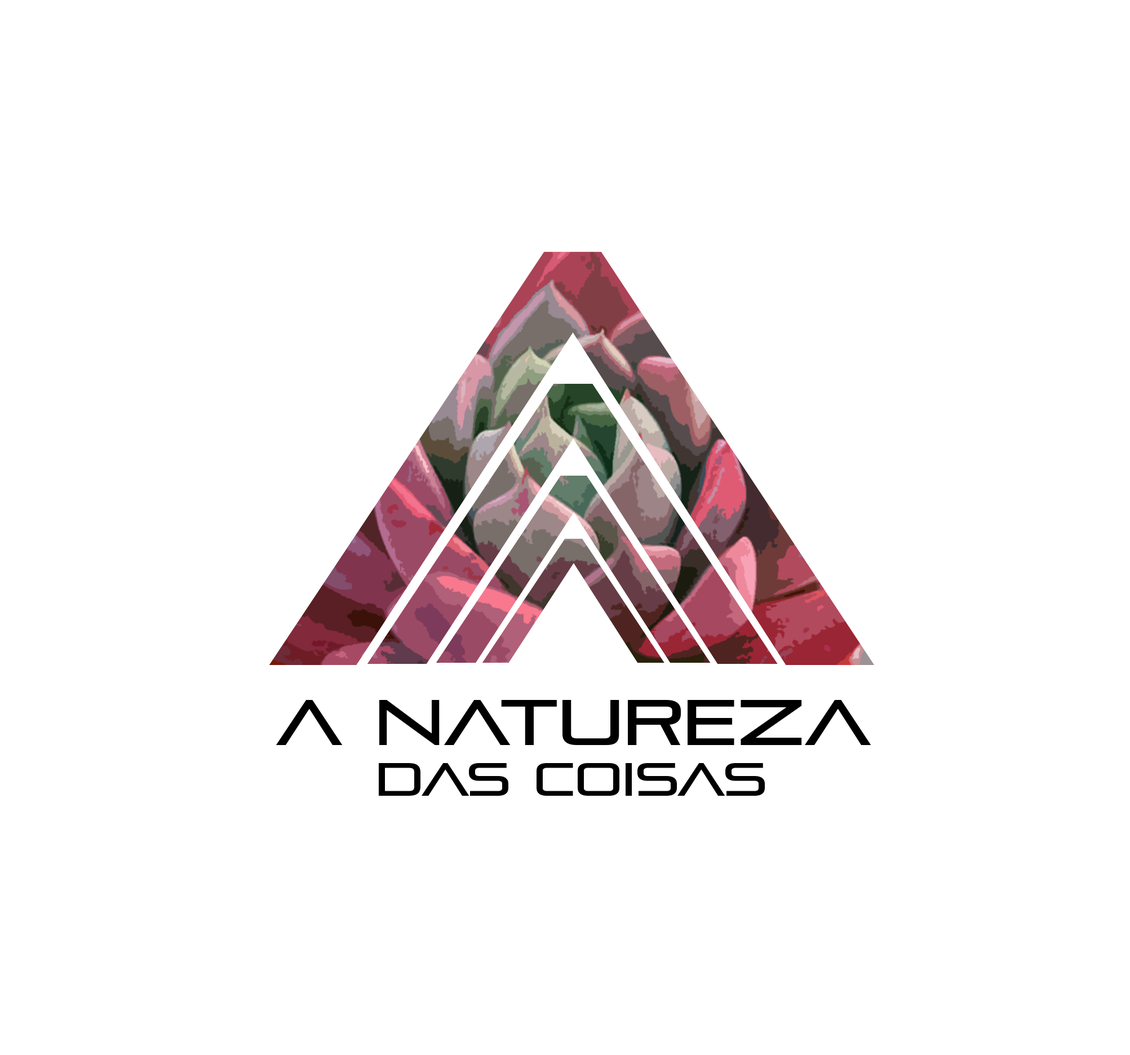
<style>
.page{position:relative;width:1130px;height:1055px;background:#ffffff}
.page>*{position:absolute;margin:0}
.t1{font:64.1px "PirulenRg-Regular";letter-spacing:0.01em;color:#000000}
.t2{font:46.1px "PirulenRg-Regular";color:#000000}
</style>
<div class="page">
<p class="t1" style="left:276px;top:700px;width:595px;height:45px">a naTureza</p>
<p class="t2" style="left:379px;top:763px;width:386px;height:33px">das coisas</p>
</div>
